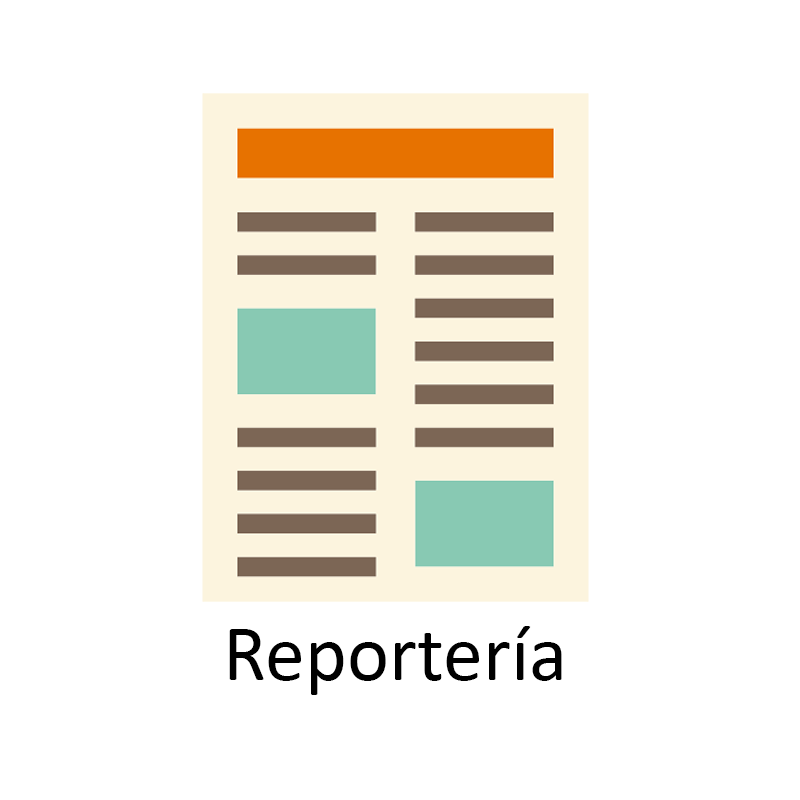
<style>
.page{position:relative;width:800px;height:800px;background:#ffffff}
.page>*{position:absolute;margin:0}
.t1{font:80px "Calibri";color:#000000}
</style>
<div class="page">
<p class="t1" style="left:229px;top:626px;width:333px;height:69px">Reportería</p>
</div>
